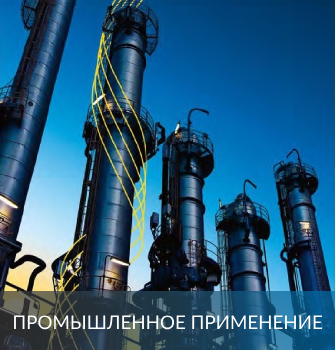
<style>
.page{position:relative;width:335px;height:350px}
.page>*{position:absolute;margin:0}
.t1{font:18.8px "Lato-Regular";color:#ffffff}
</style>
<div class="page">
<p class="t1" style="left:14px;top:315px;width:308px;height:15px">ПРОМЫШЛЕННОЕ ПРИМЕНЕНИЕ</p>
</div>
